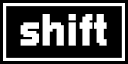
<style>
.page{position:relative;width:128px;height:64px;background:#000000}
.page>*{position:absolute;margin:0}
.t1{font:45px "Pixellari";letter-spacing:-0.025em;color:#ffffff;font-weight:bold}
</style>
<div class="page">
<p class="t1" style="left:20px;top:14px;width:87px;height:32px">shift</p>
</div>
